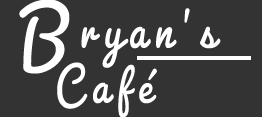
<style>
.page{position:relative;width:262px;height:117px;background:#333333}
.page>*{position:absolute;margin:0}
.t1{font:62.5px/65px "Pacifico-Regular";letter-spacing:0.16em;color:#ffffff;scale:0.8 1}
.t2{font:96px "Pacifico-Regular";letter-spacing:0.16em;color:#ffffff;scale:0.83 1}
.t3{font:60px "Pacifico-Regular";letter-spacing:0.16em;color:#ffffff;scale:0.83 1}
</style>
<div class="page">
<p class="t1" style="left:19px;top:0px;width:202px;height:118px"><span class="t2">B</span>ryan’s<br>  <span class="t3">Café</span></p>
</div>
